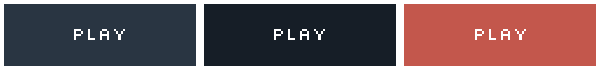
<style>
.page{position:relative;width:600px;height:70px;background:#c3574c}
.page>*{position:absolute;margin:0}
.t1{font:18px "Silkscreen";letter-spacing:0.05em;color:#ffffff}
</style>
<div class="page">
<p class="t1" style="left:74px;top:29px;width:51px;height:11px">Play</p>
<p class="t1" style="left:274px;top:29px;width:51px;height:11px">Play</p>
<p class="t1" style="left:475px;top:29px;width:51px;height:11px">Play</p>
</div>
